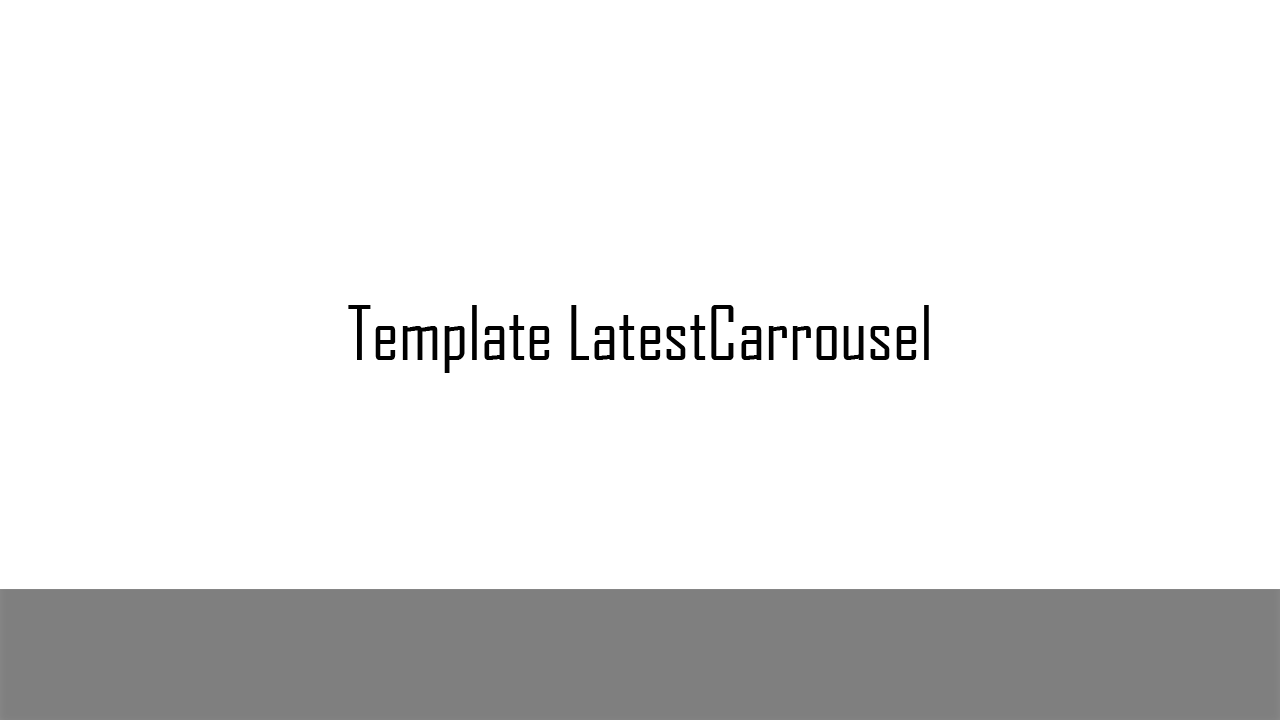
<style>
.page{position:relative;width:1280px;height:720px;background:#ffffff}
.page>*{position:absolute;margin:0}
.t1{font:72px "AgencyFB-Reg";color:#000000}
</style>
<div class="page">
<p class="t1" style="left:348px;top:305px;width:581px;height:68px">Template LatestCarrousel</p>
</div>
